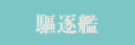
<style>
.page{position:relative;width:135px;height:45px;background:#7dc6c6}
.page>*{position:absolute;margin:0}
.t1{font:21px "RyuminPro-Medium";color:#f4e6df}
</style>
<div class="page">
<p class="t1" style="left:36px;top:14px;width:62px;height:20px">驅逐艦</p>
</div>
